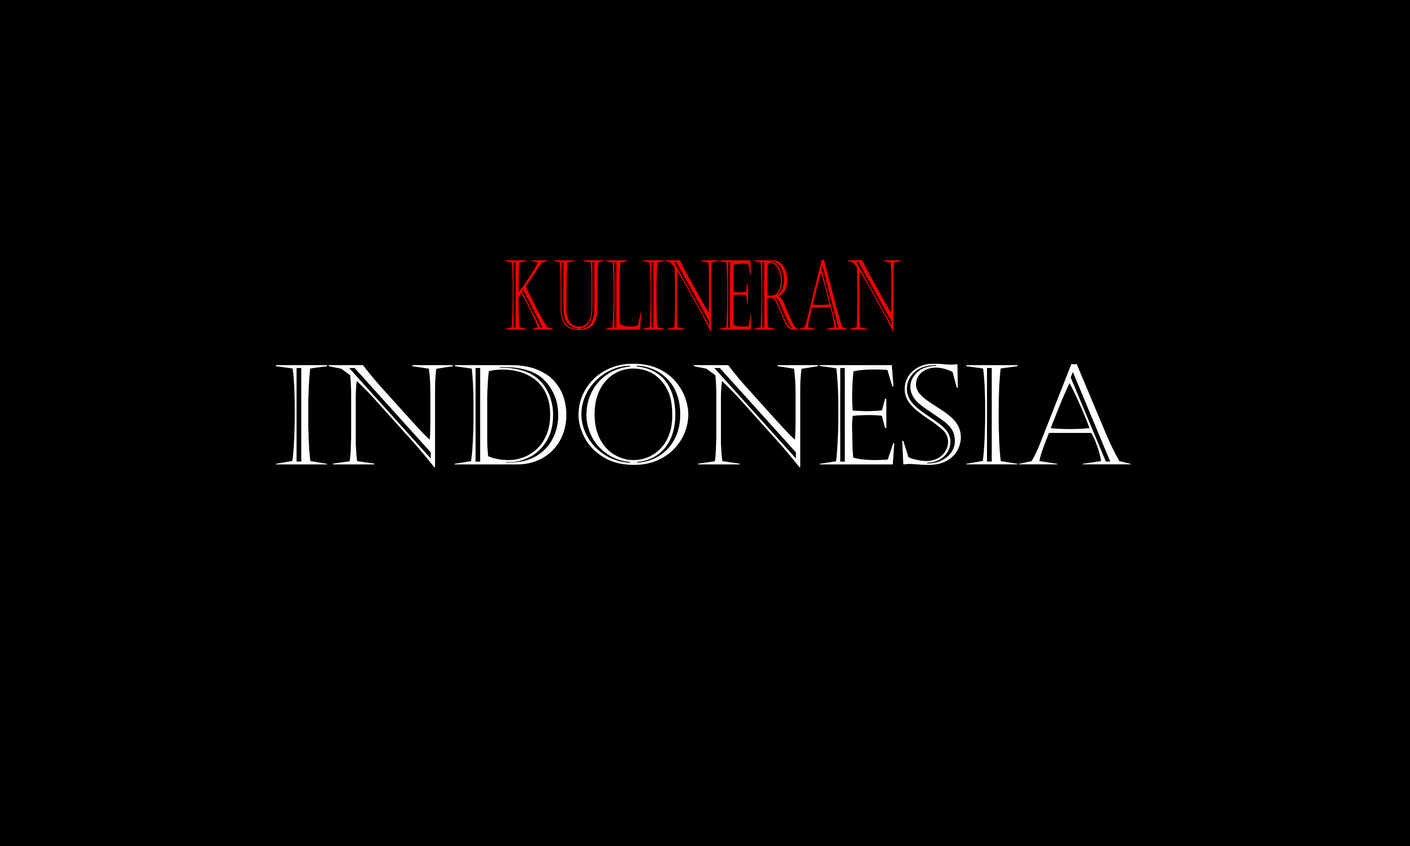
<style>
.page{position:relative;width:1410px;height:846px;background:#000000}
.page>*{position:absolute;margin:0}
.t1{font:96.4px "Castellar";color:#f40000;scale:0.62 1}
.t2{font:138.5px "Castellar";color:#fefefe}
</style>
<div class="page">
<p class="t1" style="left:505px;top:259px;width:396px;height:72px">kulineran</p>
<p class="t2" style="left:276px;top:363px;width:855px;height:104px">INDONESIA</p>
</div>
